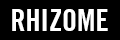
<style>
.page{position:relative;width:120px;height:40px;background:#000000}
.page>*{position:absolute;margin:0}
.t1{font:30px "TradeGothicLT-BoldCondTwenty";color:#ffffff}
</style>
<div class="page">
<p class="t1" style="left:12px;top:9px;width:96px;height:22px">RHIZOME</p>
</div>
